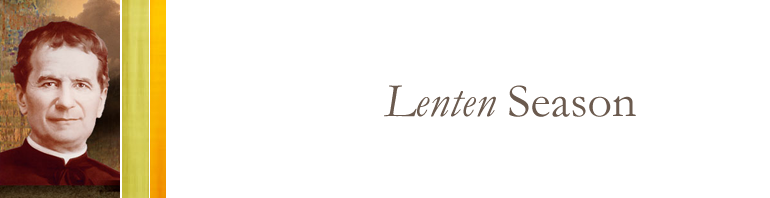
<style>
.page{position:relative;width:770px;height:198px;background:#ffffff}
.page>*{position:absolute;margin:0}
.t1{font:48px "Garamond-Italic";color:#6b5a4e}
.t2{font:48px "Garamond";color:#6b5a4e}
</style>
<div class="page">
<p class="t1" style="left:384px;top:85px;width:252px;height:32px">Lenten <span class="t2">Season</span></p>
</div>
